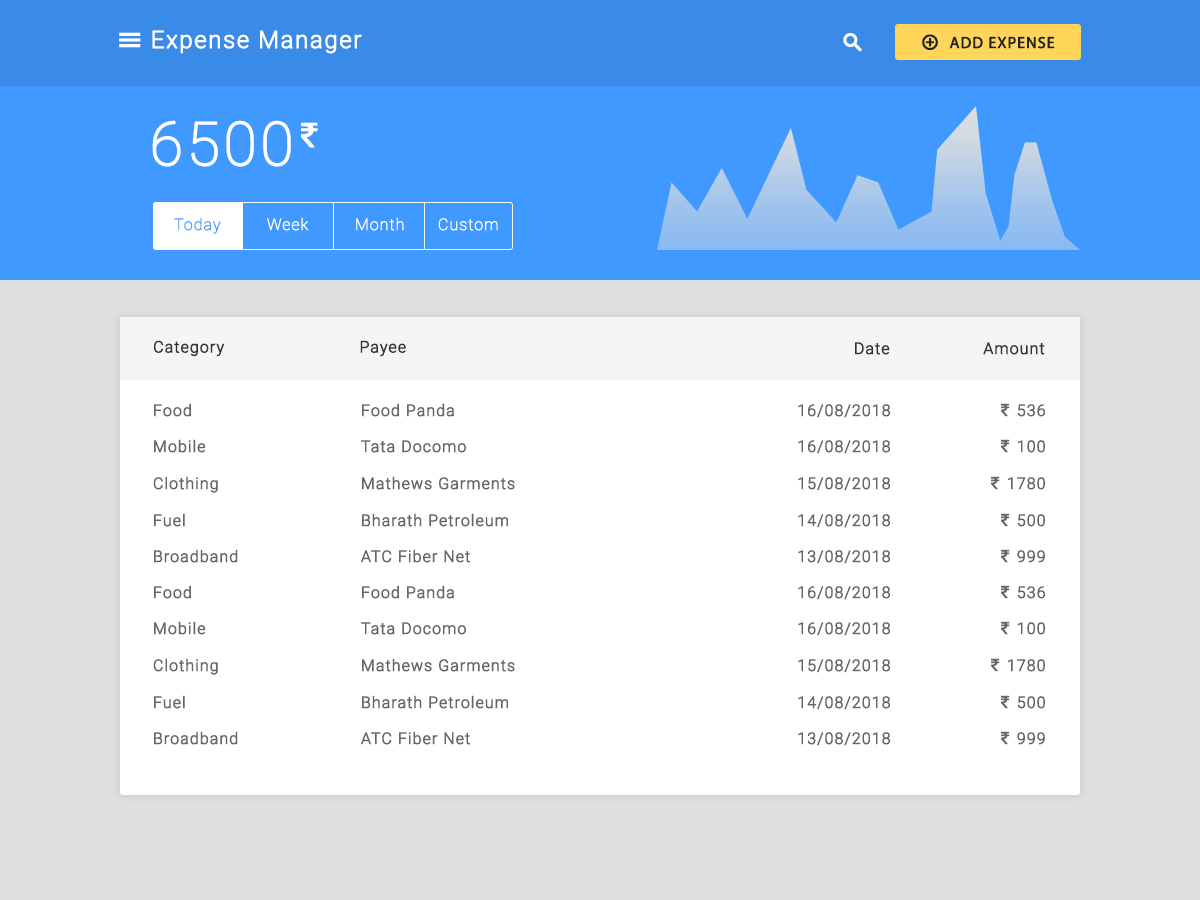
<style>
.page{position:relative;width:1200px;height:900px;background:#ffffff}
.page>*{position:absolute;margin:0}
.t1{font:24px "Roboto-Light";letter-spacing:0.04em;color:#ffffff;font-weight:bold}
.t2{font:16px "MyriadPro-Regular";letter-spacing:0.04em;color:#232323;font-weight:bold}
.t3{font:60px "Roboto-Thin";letter-spacing:0.04em;color:#ffffff;font-weight:bold}
.t4{font:36px "MyriadPro-Regular";letter-spacing:0.04em;color:#ffffff;font-weight:bold}
.t5{font:16px "Roboto-Thin";letter-spacing:0.04em;color:#4099ff;font-weight:bold}
.t6{font:16px "Roboto-Thin";letter-spacing:0.04em;color:#ffffff;font-weight:bold}
.t7{font:16px "Roboto-Light";letter-spacing:0.04em;color:#333333;font-weight:bold}
.t8{font:16px "Roboto-Light";letter-spacing:0.04em;color:#666666;font-weight:bold}
.t9{font:18px "MyriadPro-Regular";letter-spacing:0.04em;color:#666666;font-weight:bold}
</style>
<div class="page">
<p class="t1" style="left:152px;top:30px;width:210px;height:24px">Expense Manager</p>
<p class="t2" style="left:949px;top:36px;width:106px;height:13px">ADD EXPENSE</p>
<p class="t3" style="left:152px;top:120px;width:139px;height:47px">6500</p>
<p class="t4" style="left:301px;top:122px;width:17px;height:26px">₹</p>
<p class="t5" style="left:174px;top:217px;width:47px;height:17px">Today</p>
<p class="t6" style="left:267px;top:217px;width:42px;height:14px">Week</p>
<p class="t6" style="left:356px;top:217px;width:48px;height:14px">Month</p>
<p class="t6" style="left:438px;top:218px;width:60px;height:13px">Custom</p>
<p class="t7" style="left:154px;top:340px;width:71px;height:17px">Category</p>
<p class="t7" style="left:360px;top:340px;width:46px;height:17px">Payee</p>
<p class="t7" style="left:855px;top:342px;width:35px;height:13px">Date</p>
<p class="t7" style="left:983px;top:342px;width:62px;height:13px">Amount</p>
<p class="t8" style="left:154px;top:403px;width:37px;height:14px">Food</p>
<p class="t8" style="left:362px;top:403px;width:92px;height:14px">Food Panda</p>
<p class="t8" style="left:798px;top:404px;width:92px;height:14px">16/08/2018</p>
<p class="t8" style="left:1001px;top:403px;width:44px;height:14px"><span class="t9">₹ </span>536</p>
<p class="t8" style="left:154px;top:439px;width:52px;height:14px">Mobile</p>
<p class="t8" style="left:361px;top:440px;width:105px;height:13px">Tata Docomo</p>
<p class="t8" style="left:798px;top:440px;width:92px;height:14px">16/08/2018</p>
<p class="t8" style="left:1001px;top:439px;width:44px;height:14px"><span class="t9">₹ </span>100</p>
<p class="t8" style="left:153px;top:476px;width:65px;height:17px">Clothing</p>
<p class="t8" style="left:362px;top:476px;width:153px;height:14px">Mathews Garments</p>
<p class="t8" style="left:798px;top:477px;width:92px;height:14px">15/08/2018</p>
<p class="t8" style="left:991px;top:476px;width:54px;height:14px"><span class="t9">₹ </span>1780</p>
<p class="t8" style="left:154px;top:513px;width:31px;height:14px">Fuel</p>
<p class="t8" style="left:362px;top:513px;width:146px;height:14px">Bharath Petroleum</p>
<p class="t8" style="left:798px;top:514px;width:92px;height:14px">14/08/2018</p>
<p class="t8" style="left:1001px;top:513px;width:44px;height:14px"><span class="t9">₹ </span>500</p>
<p class="t8" style="left:154px;top:549px;width:84px;height:14px">Broadband</p>
<p class="t8" style="left:361px;top:549px;width:109px;height:14px">ATC Fiber Net</p>
<p class="t8" style="left:798px;top:550px;width:92px;height:14px">13/08/2018</p>
<p class="t8" style="left:1001px;top:549px;width:44px;height:14px"><span class="t9">₹ </span>999</p>
<p class="t8" style="left:154px;top:585px;width:37px;height:14px">Food</p>
<p class="t8" style="left:362px;top:585px;width:92px;height:14px">Food Panda</p>
<p class="t8" style="left:798px;top:586px;width:92px;height:14px">16/08/2018</p>
<p class="t8" style="left:1001px;top:585px;width:44px;height:14px"><span class="t9">₹ </span>536</p>
<p class="t8" style="left:154px;top:621px;width:52px;height:14px">Mobile</p>
<p class="t8" style="left:361px;top:622px;width:105px;height:13px">Tata Docomo</p>
<p class="t8" style="left:798px;top:622px;width:92px;height:14px">16/08/2018</p>
<p class="t8" style="left:1001px;top:621px;width:44px;height:14px"><span class="t9">₹ </span>100</p>
<p class="t8" style="left:153px;top:658px;width:65px;height:17px">Clothing</p>
<p class="t8" style="left:362px;top:658px;width:153px;height:14px">Mathews Garments</p>
<p class="t8" style="left:798px;top:659px;width:92px;height:14px">15/08/2018</p>
<p class="t8" style="left:991px;top:658px;width:54px;height:14px"><span class="t9">₹ </span>1780</p>
<p class="t8" style="left:154px;top:695px;width:31px;height:14px">Fuel</p>
<p class="t8" style="left:362px;top:695px;width:146px;height:14px">Bharath Petroleum</p>
<p class="t8" style="left:798px;top:696px;width:92px;height:14px">14/08/2018</p>
<p class="t8" style="left:1001px;top:695px;width:44px;height:14px"><span class="t9">₹ </span>500</p>
<p class="t8" style="left:154px;top:731px;width:84px;height:14px">Broadband</p>
<p class="t8" style="left:361px;top:731px;width:109px;height:14px">ATC Fiber Net</p>
<p class="t8" style="left:798px;top:732px;width:92px;height:14px">13/08/2018</p>
<p class="t8" style="left:1001px;top:731px;width:44px;height:14px"><span class="t9">₹ </span>999</p>
</div>
